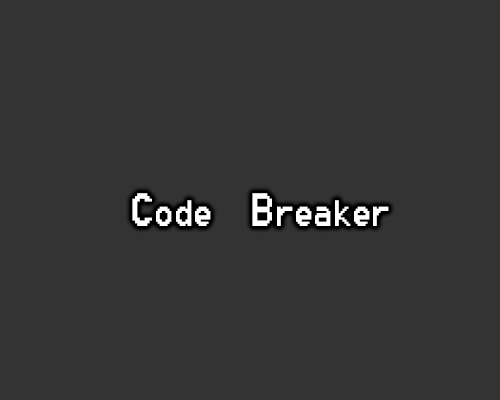
<style>
.page{position:relative;width:500px;height:400px;background:#333333}
.page>*{position:absolute;margin:0}
.t1{font:45.8px "8514oem";color:#ffffff;scale:0.9 1}
.t2{font:58.3px "8514oem";color:#ffffff;scale:0.9 1}
</style>
<div class="page">
<p class="t1" style="left:132px;top:193px;width:257px;height:33px"><span class="t2">C</span>ode  <span class="t2">B</span>reaker</p>
</div>
